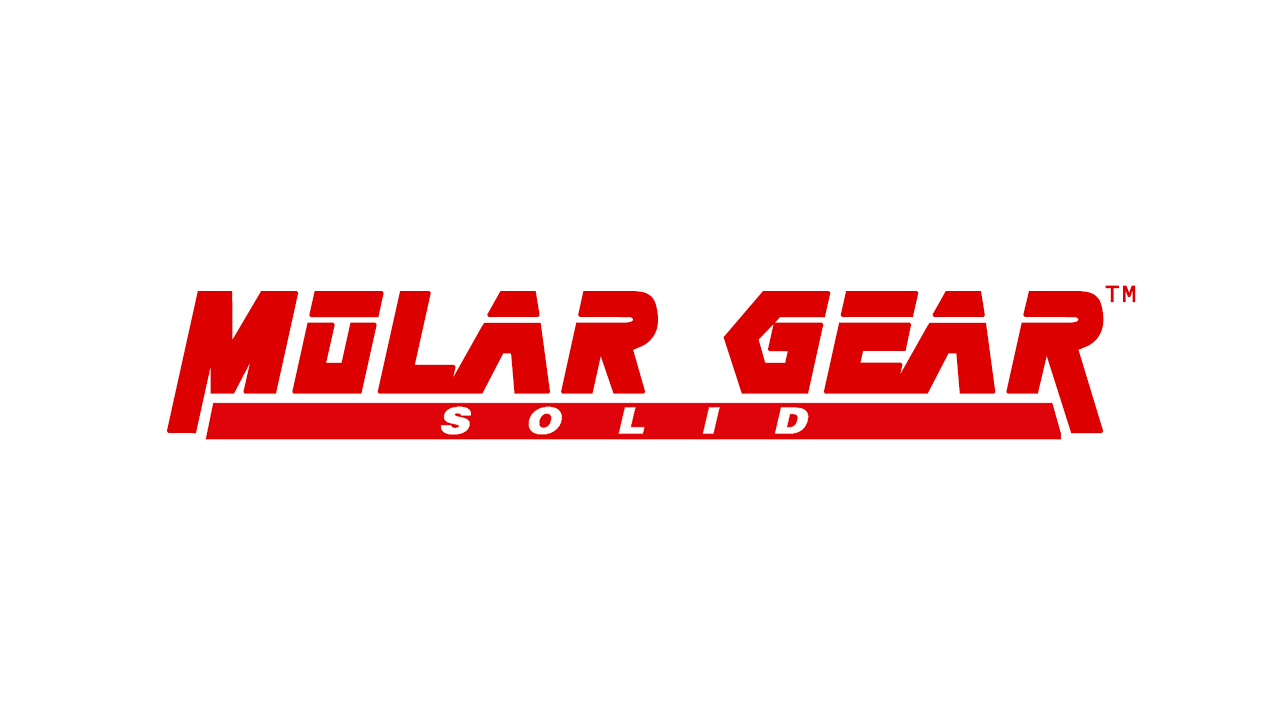
<style>
.page{position:relative;width:1280px;height:720px;background:#ffffff}
.page>*{position:absolute;margin:0}
.t1{font:110px "MetalGear";letter-spacing:0.075em;color:#dd0000;font-weight:bold}
.t2{font:24px "LiberationMono";letter-spacing:0.075em;color:#dd0000;font-weight:bold}
</style>
<div class="page">
<p class="t1" style="left:166px;top:291px;width:938px;height:143px">Molar geaR</p>
<p class="t2" style="left:1105px;top:285px;width:31px;height:18px">TM</p>
</div>
